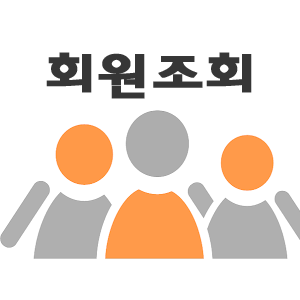
<style>
.page{position:relative;width:300px;height:300px;background:#ffffff}
.page>*{position:absolute;margin:0}
.t1{font:48px "HaanYGodic25";color:#363636;font-weight:bold;scale:1.2 1}
</style>
<div class="page">
<p class="t1" style="left:46px;top:52px;width:206px;height:47px">회원조회</p>
</div>
